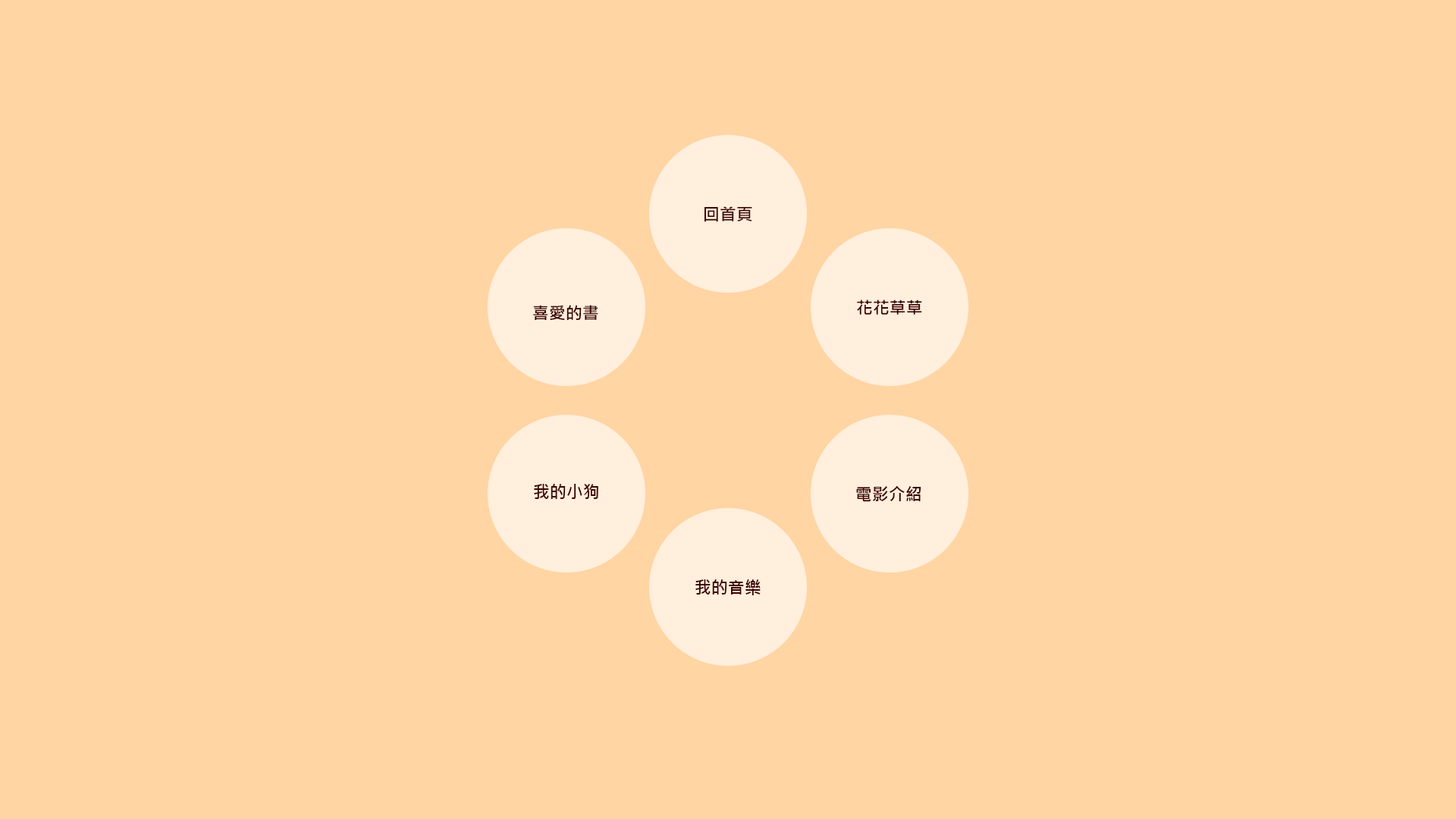
<style>
.page{position:relative;width:1456px;height:819px;background:#ffd5a4}
.page>*{position:absolute;margin:0}
.t1{font:16.7px "MicrosoftJhengHeiBold";color:#3d0202}
</style>
<div class="page">
<p class="t1" style="left:704px;top:206px;width:48px;height:16px">回首頁</p>
<p class="t1" style="left:533px;top:305px;width:65px;height:15px">喜愛的書</p>
<p class="t1" style="left:857px;top:300px;width:65px;height:15px">花花草草</p>
<p class="t1" style="left:534px;top:484px;width:64px;height:15px">我的小狗</p>
<p class="t1" style="left:856px;top:486px;width:65px;height:16px">電影介紹</p>
<p class="t1" style="left:695px;top:579px;width:66px;height:16px">我的音樂</p>
</div>
